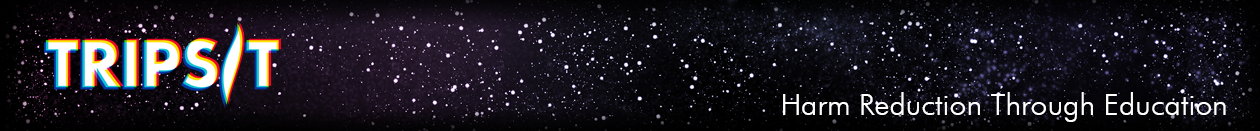
<style>
.page{position:relative;width:1260px;height:131px}
.page>*{position:absolute;margin:0}
.t1{font:30px "FuturaOblique";color:#ffffff}
</style>
<div class="page">
<p class="t1" style="left:783px;top:92px;width:443px;height:30px">Harm Reduction Through Education</p>
</div>
